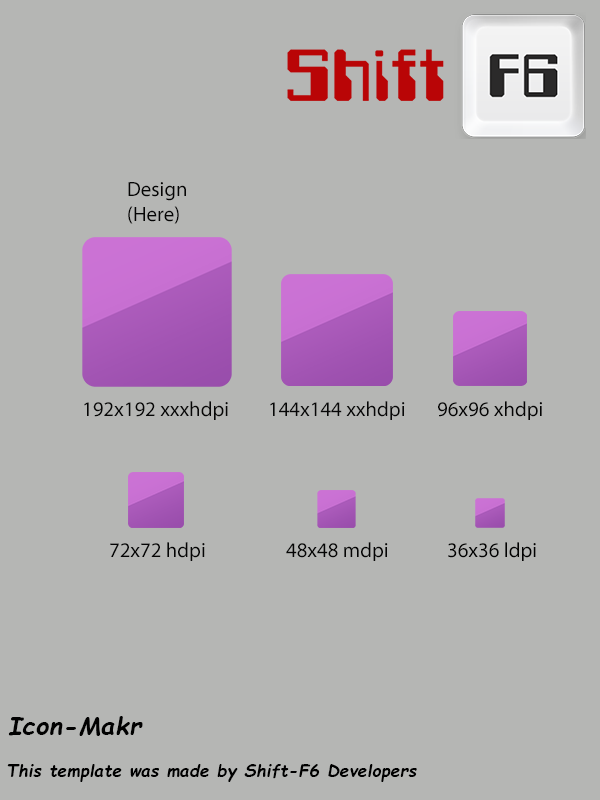
<style>
.page{position:relative;width:600px;height:800px;background:#b5b6b4}
.page>*{position:absolute;margin:0}
.t1{font:20.8px "MyriadPro-Regular";color:#050505}
.t2{font:20.8px "MyriadPro-Regular";color:#060606}
.t3{font:20.8px "MyriadPro-Regular";color:#070707}
.t4{font:20.8px "MyriadPro-Regular";color:#040404}
.t5{font:20.8px "MyriadPro-Regular";color:#010101}
.t6{font:25px "ComicSansMS-BoldItalic";letter-spacing:0.02em;color:#010101}
.t7{font:16.7px "ComicSansMS-BoldItalic";letter-spacing:0.02em;color:#000000}
</style>
<div class="page">
<p class="t1" style="left:128px;top:182px;width:58px;height:42px">Design<br>(Here)</p>
<p class="t2" style="left:84px;top:401px;width:144px;height:19px">192x192 xxxhdpi</p>
<p class="t3" style="left:270px;top:401px;width:135px;height:19px">144x144 xxhdpi</p>
<p class="t1" style="left:438px;top:401px;width:104px;height:19px">96x96 xhdpi</p>
<p class="t4" style="left:110px;top:542px;width:95px;height:19px">72x72 hdpi</p>
<p class="t4" style="left:286px;top:542px;width:102px;height:19px">48x48 mdpi</p>
<p class="t5" style="left:448px;top:542px;width:88px;height:19px">36x36 ldpi</p>
<p class="t6" style="left:8px;top:716px;width:135px;height:20px">Icon-Makr</p>
<p class="t7" style="left:7px;top:764px;width:410px;height:18px">This template was made by Shift-F6 Developers</p>
</div>
